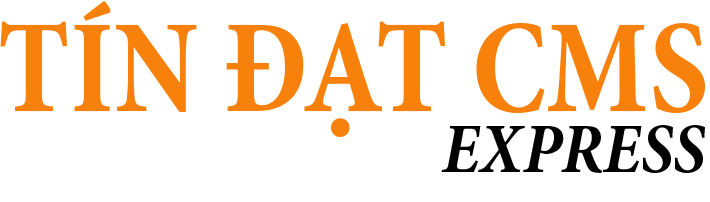
<style>
.page{position:relative;width:710px;height:202px;background:#ffffff}
.page>*{position:absolute;margin:0}
.t1{font:133.6px "MinionPro-BoldCn";color:#f7810b;scale:0.96 1}
.t2{font:70.2px "MinionPro-BoldCnIt";color:#000000}
</style>
<div class="page">
<p class="t1" style="left:0px;top:1px;width:705px;height:136px">TÍN ĐẠT CMS</p>
<p class="t2" style="left:441px;top:125px;width:264px;height:48px">EXPRESS</p>
</div>
